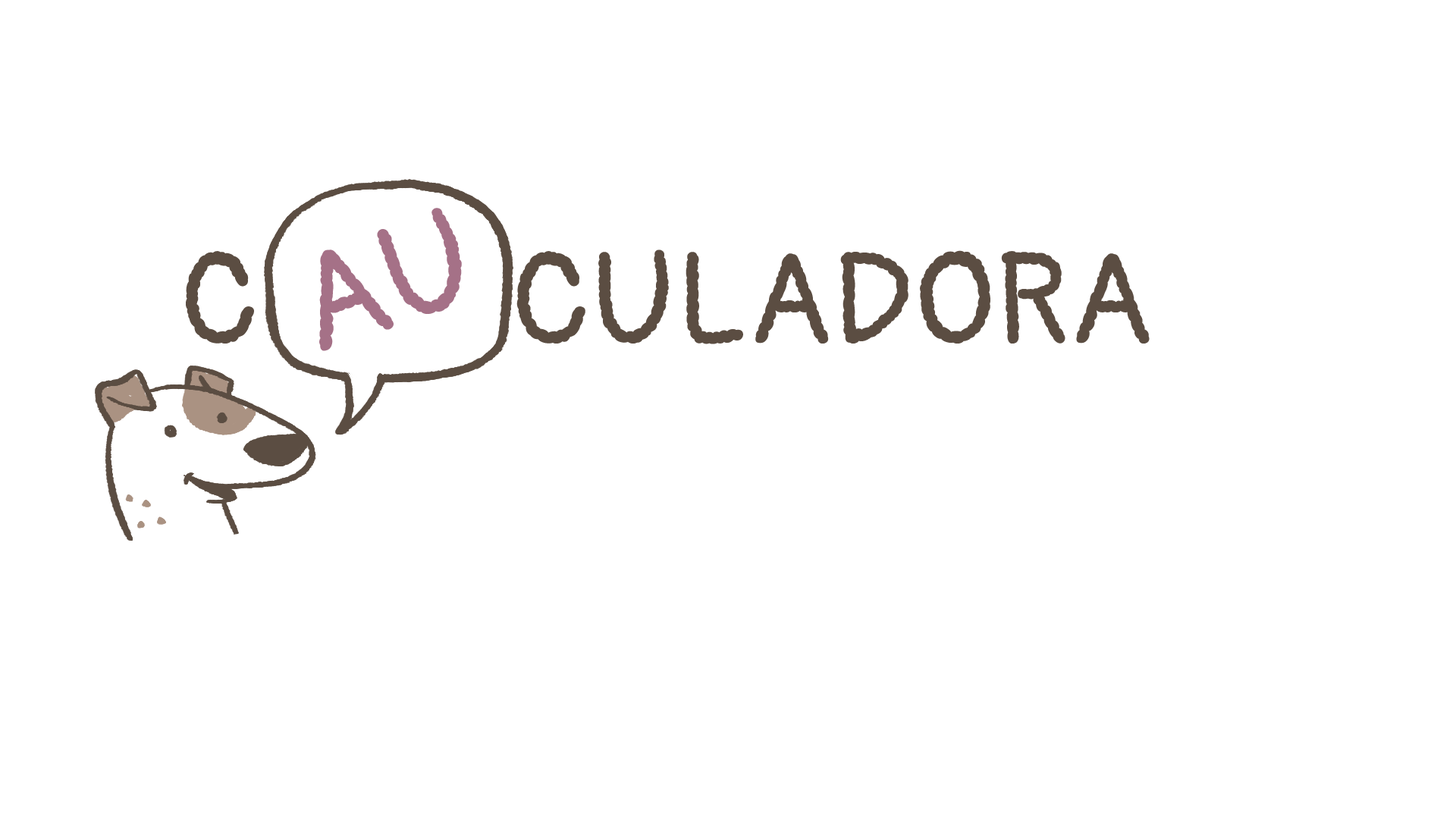
<style>
.page{position:relative;width:1456px;height:819px;background:#ffffff}
.page>*{position:absolute;margin:0}
.t1{font:136.5px "Pangolin-Regular";color:#a57187}
.t2{font:128.9px "Pangolin-Regular";color:#5b4d42}
</style>
<div class="page">
<p class="t1" style="left:319px;top:208px;width:143px;height:143px;rotate:-19deg">AU</p>
<p class="t2" style="left:186px;top:249px;width:964px;height:95px">C         CULADORA</p>
</div>
